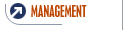
<style>
.page{position:relative;width:123px;height:30px;background:#ffffff}
.page>*{position:absolute;margin:0}
.t1{font:14.6px "PlacardMT-Condensed";color:#bd4701}
</style>
<div class="page">
<p class="t1" style="left:31px;top:5px;width:56px;height:12px">MANAGEMENT</p>
</div>
